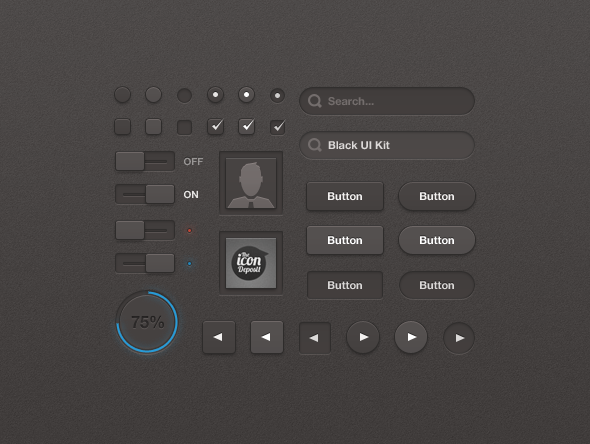
<style>
.page{position:relative;width:590px;height:444px}
.page>*{position:absolute;margin:0}
.t1{font:11px "HelveticaNeue-Bold";color:#736d6c}
.t2{font:11px "HelveticaNeue-Bold";color:#dcd9d8}
.t3{font:10px "HelveticaNeue-Bold";color:#989594}
.t4{font:10px "HelveticaNeue-Bold";color:#e6e4e3}
.t5{font:11px "HelveticaNeue-Bold";color:#f3f1f0}
.t6{font:11px "HelveticaNeue-Bold";color:#ffffff}
.t7{font:11px "HelveticaNeue-Bold";color:#dad8d7}
.t8{font:17.1px "HelveticaNeue-Bold";color:#2b2828;scale:0.94 1}
</style>
<div class="page">
<p class="t1" style="left:328px;top:97px;width:46px;height:9px">Search...</p>
<p class="t2" style="left:328px;top:141px;width:62px;height:9px">Black UI Kit</p>
<p class="t3" style="left:184px;top:157px;width:19px;height:9px">OFF</p>
<p class="t4" style="left:184px;top:190px;width:14px;height:9px">ON</p>
<p class="t5" style="left:328px;top:192px;width:34px;height:9px">Button</p>
<p class="t5" style="left:420px;top:192px;width:34px;height:9px">Button</p>
<p class="t6" style="left:328px;top:236px;width:34px;height:9px">Button</p>
<p class="t6" style="left:420px;top:236px;width:34px;height:9px">Button</p>
<p class="t7" style="left:328px;top:281px;width:34px;height:9px">Button</p>
<p class="t7" style="left:420px;top:281px;width:34px;height:9px">Button</p>
<p class="t8" style="left:131px;top:315px;width:33px;height:14px">75%</p>
</div>
